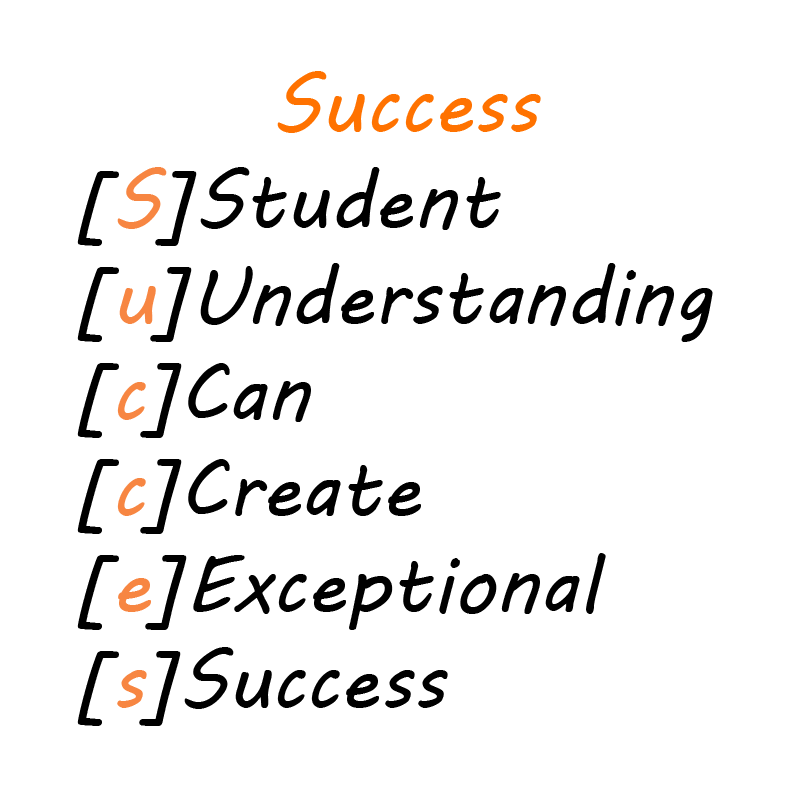
<style>
.page{position:relative;width:800px;height:800px;background:#ffffff}
.page>*{position:absolute;margin:0}
.t1{font:80px "MVBoli";color:#000000}
.t2{font:80px "MVBoli";color:#ff7200}
.t3{font:80px "MVBoli";color:#f78642}
</style>
<div class="page">
<p class="t1" style="left:77px;top:71px;width:636px;height:655px"><span class="t2">     Success<br></span>[<span class="t3">S</span>]Student<br>[<span class="t3">u</span>]Understanding<br>[<span class="t3">c</span>]Can<br>[<span class="t3">c</span>]Create<br>[<span class="t3">e</span>]Exceptional<br>[<span class="t3">s</span>]Success<br>[<span class="t3">s</span>]Stories</p>
</div>
